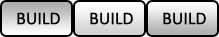
<style>
.page{position:relative;width:219px;height:37px}
.page>*{position:absolute;margin:0}
.t1{font:18px "Calibri";color:#000000;text-transform:uppercase}
</style>
<div class="page">
<p class="t1" style="left:17px;top:12px;width:43px;height:13px">Build</p>
<p class="t1" style="left:90px;top:12px;width:43px;height:13px">Build</p>
<p class="t1" style="left:163px;top:12px;width:43px;height:13px">Build</p>
</div>
